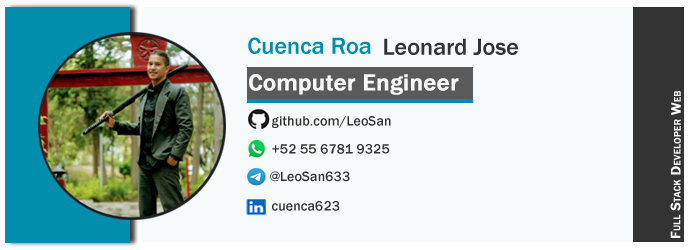
<style>
.page{position:relative;width:700px;height:250px;background:#f6fafb}
.page>*{position:absolute;margin:0}
.t1{font:24px "FranklinGothic-Medium";letter-spacing:0.005em;color:#018eac}
.t2{font:24px "FranklinGothic-Medium";letter-spacing:0.005em;color:#333333}
.t3{font:24px "FranklinGothic-Medium";letter-spacing:0.005em;color:#f9f8f8;font-weight:bold}
.t4{font:24px "FranklinGothic-Medium";letter-spacing:0.005em;color:#f9f8f8;font-variant:small-caps;font-weight:bold}
.t5{font:14px "FranklinGothic-Medium";letter-spacing:0.005em;color:#333333}
</style>
<div class="page">
<p class="t1" style="left:248px;top:37px;width:123px;height:17px">Cuenca Roa</p>
<p class="t2" style="left:384px;top:38px;width:134px;height:17px">Leonard Jose</p>
<p class="t3" style="left:249px;top:74px;width:210px;height:21px">Computer Engineer</p>
<p class="t4" style="left:670px;top:91px;width:11px;height:147px;rotate:-90deg">Full Stack Developer Web</p>
<p class="t5" style="left:272px;top:116px;width:119px;height:12px">github.com/LeoSan</p>
<p class="t5" style="left:272px;top:144px;width:118px;height:10px">+52 55 6781 9325</p>
<p class="t5" style="left:270px;top:171px;width:80px;height:11px">@LeoSan633</p>
<p class="t5" style="left:272px;top:201px;width:68px;height:10px">cuenca623</p>
</div>
